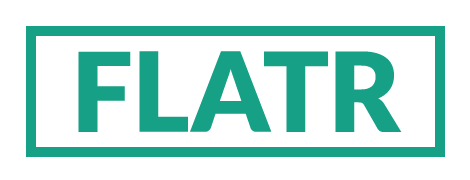
<style>
.page{position:relative;width:470px;height:180px;background:#ffffff}
.page>*{position:absolute;margin:0}
.t1{font:110.3px "Lato-Black";color:#16a085}
</style>
<div class="page">
<p class="t1" style="left:78px;top:51px;width:324px;height:81px">FLATR</p>
</div>
